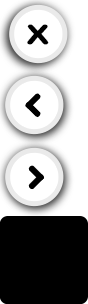
<style>
.page{position:relative;width:88px;height:304px;background:#ffffff}
.page>*{position:absolute;margin:0}
.t1{font:37.1px "ArialRoundedMTBold";color:#000000;scale:1.21 1}
</style>
<div class="page">
<p class="t1" style="left:27px;top:24px;width:22px;height:21px">x</p>
</div>
